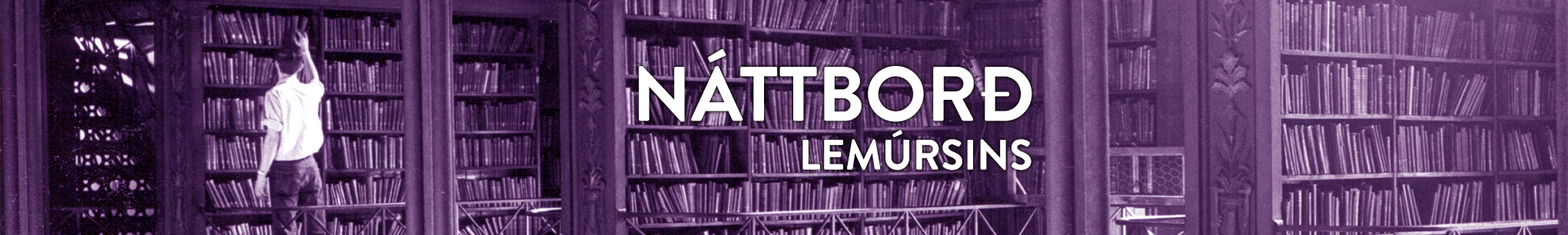
<style>
.page{position:relative;width:1568px;height:235px}
.page>*{position:absolute;margin:0}
.t1{font:76.9px "BrandonGrotesque-Bold";color:#ffffff}
.t2{font:42.3px "BrandonGrotesque-Bold";color:#ffffff}
</style>
<div class="page">
<p class="t1" style="left:639px;top:49px;width:393px;height:73px">NÁTTBORÐ</p>
<p class="t2" style="left:802px;top:130px;width:229px;height:41px">LEMÚRSINS</p>
</div>
